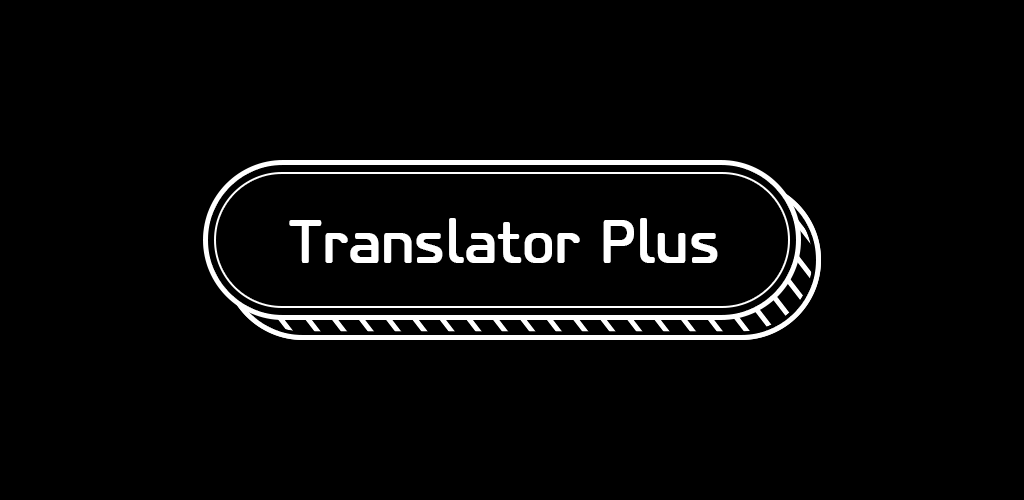
<style>
.page{position:relative;width:1024px;height:500px;background:#000000}
.page>*{position:absolute;margin:0}
.t1{font:62.8px "PFIsotextPro-Regular";color:#ffffff;font-weight:bold}
</style>
<div class="page">
<p class="t1" style="left:289px;top:218px;width:429px;height:45px">Translator Plus</p>
</div>
